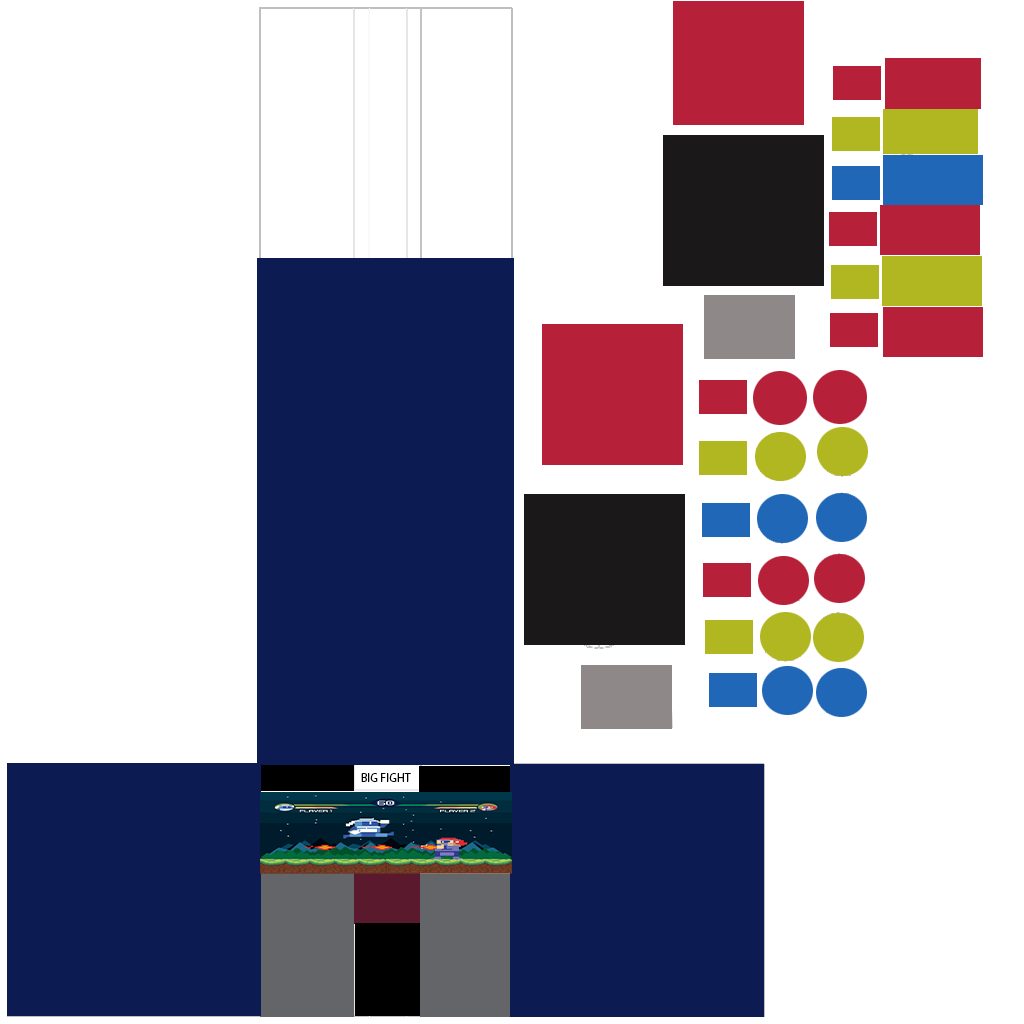
<style>
.page{position:relative;width:1024px;height:1024px;background:#ffffff}
.page>*{position:absolute;margin:0}
.t1{font:12px "MyriadPro-Regular";color:#000000}
</style>
<div class="page">
<p class="t1" style="left:361px;top:773px;width:50px;height:9px">BIG FIGHT</p>
</div>
